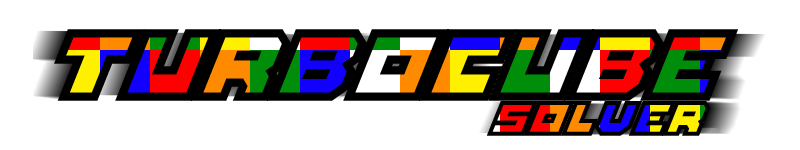
<style>
.page{position:relative;width:800px;height:150px;background:#ffffff}
.page>*{position:absolute;margin:0}
.t1{font:73.9px "FullPack2025";letter-spacing:0.05em;color:#000000}
.t2{font:36px "FullPack2025";letter-spacing:0.05em;color:#000000}
</style>
<div class="page">
<p class="t1" style="left:54px;top:29px;width:684px;height:72px">turbocube</p>
<p class="t2" style="left:486px;top:101px;width:225px;height:35px">SOLVER</p>
</div>
